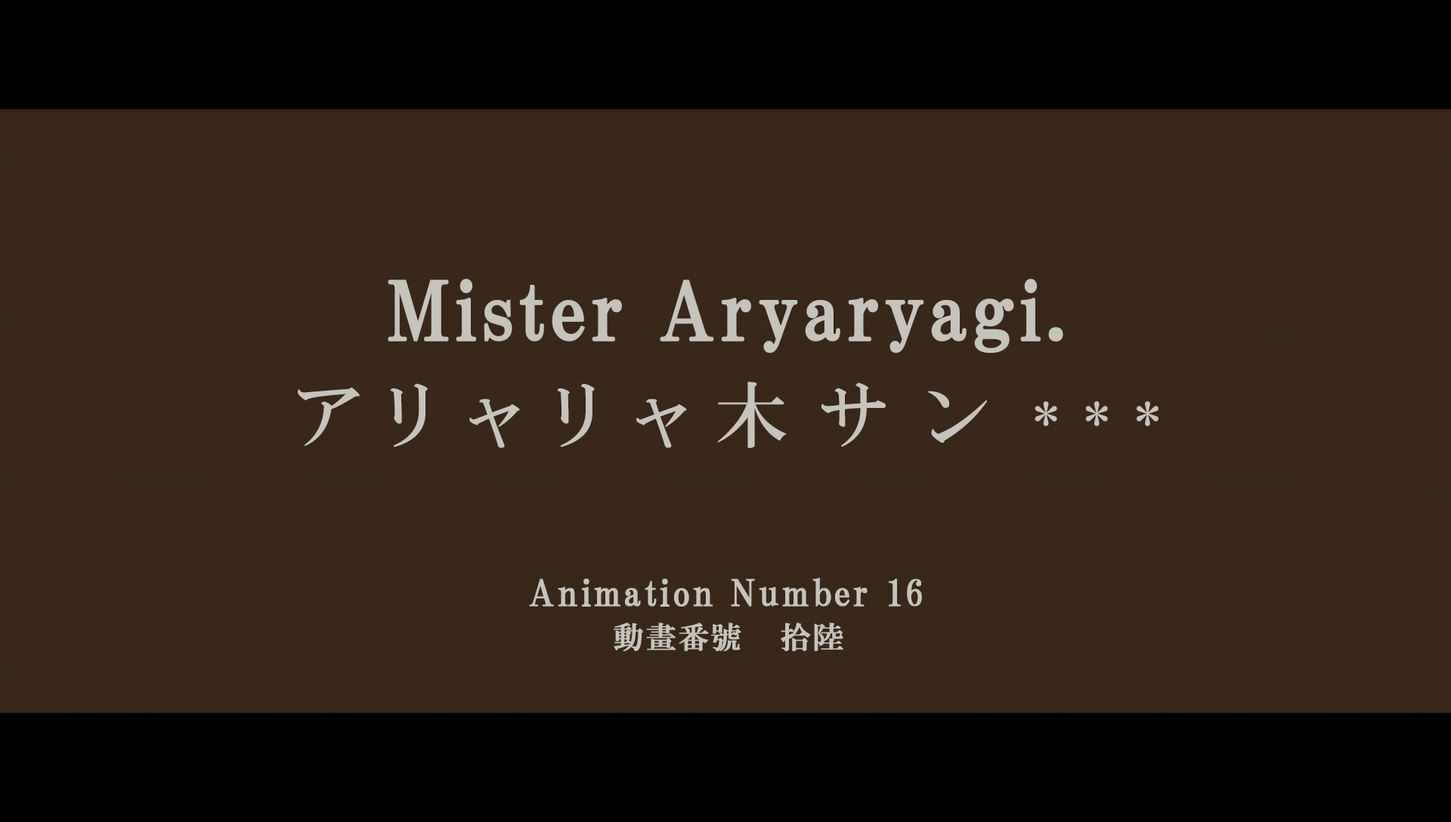
<style>
.page{position:relative;width:1451px;height:822px;background:#382719}
.page>*{position:absolute;margin:0}
.t1{font:80.6px "HGPMinchoB";letter-spacing:0.025em;color:#c4c4bc;font-weight:bold}
.t2{font:72.5px "HGMinchoB";letter-spacing:0.15em;color:#c4c4bc}
.t3{font:72.5px "HGMinchoB";letter-spacing:0.25em;color:#c4c4bc}
.t4{font:72.5px "HGMinchoB";letter-spacing:0.4em;color:#c4c4bc}
.t5{font:72.5px "HGMinchoB";letter-spacing:0.59em;color:#c4c4bc}
.t6{font:48.4px "HGMinchoB";letter-spacing:0.55em;color:#c4c4bc}
.t7{font:36.3px "HGPMinchoB";letter-spacing:0.05em;color:#c4c4bc;font-weight:bold}
.t8{font:30.2px "HGPMinchoB";letter-spacing:0.05em;color:#c4c4bc;font-weight:bold}
</style>
<div class="page">
<p class="t1" style="left:388px;top:279px;width:675px;height:75px">Mister Aryaryagi.</p>
<p class="t2" style="left:298px;top:382px;width:860px;height:66px">アリャリ<span class="t3">ャ</span><span class="t4">木サ</span><span class="t5">ン</span><span class="t6">***</span></p>
<p class="t7" style="left:529px;top:577px;width:393px;height:30px">Animation Number 16</p>
<p class="t8" style="left:613px;top:623px;width:230px;height:28px">動畫番號   拾陸</p>
</div>
